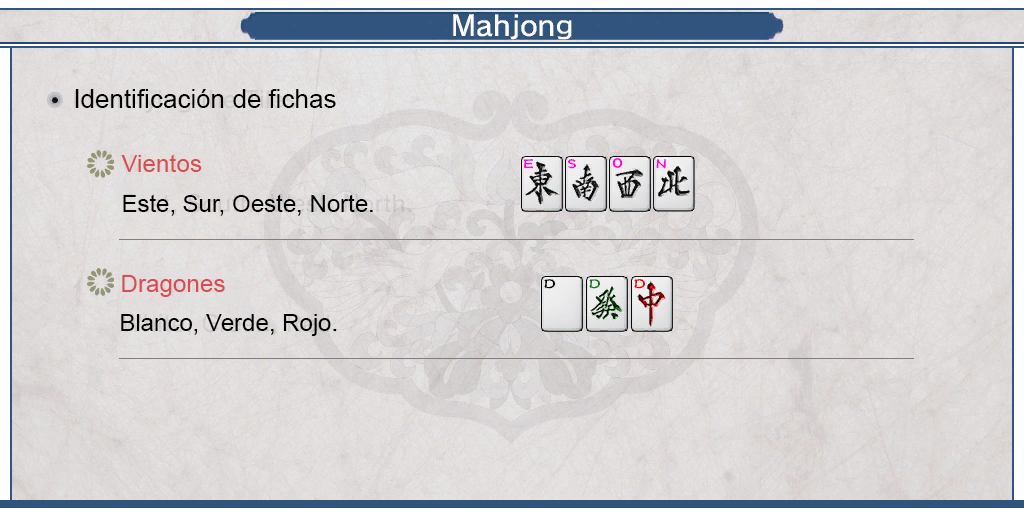
<style>
.page{position:relative;width:1024px;height:512px}
.page>*{position:absolute;margin:0}
.t1{font:26px "ArialMT";color:#000000}
.t2{font:24px "ArialMT";color:#d64d52}
.t3{font:12.9px "Arial-BoldMT";color:#ff00de;scale:1.07 1}
.t4{font:24px "ArialMT";color:#000000}
</style>
<div class="page">
<p class="t1" style="left:75px;top:89px;width:261px;height:19px">Identificación de fichas</p>
<p class="t2" style="left:121px;top:154px;width:81px;height:18px">Vientos</p>
<p class="t3" style="left:612px;top:158px;width:11px;height:10px">O</p>
<p class="t4" style="left:123px;top:194px;width:250px;height:22px">Este, Sur, Oeste, Norte.</p>
<p class="t2" style="left:122px;top:275px;width:103px;height:22px">Dragones</p>
<p class="t4" style="left:121px;top:314px;width:216px;height:22px">Blanco, Verde, Rojo.</p>
</div>
